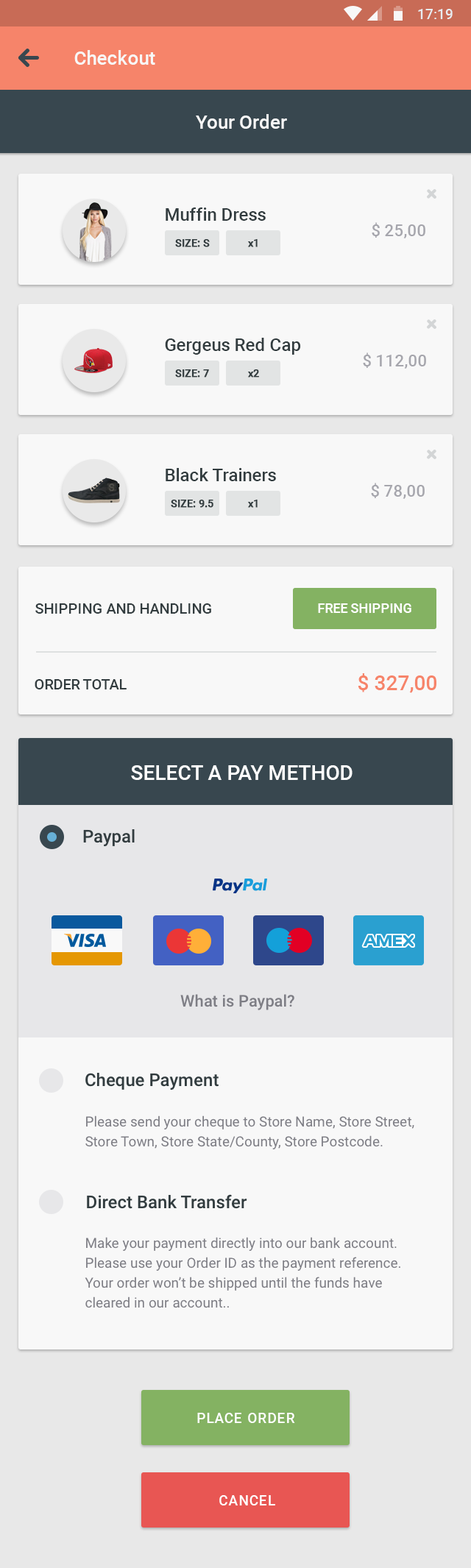
<style>
.page{position:relative;width:471px;height:1568px;background:#f8f8f8}
.page>*{position:absolute;margin:0}
.t1{font:14px "Roboto-Medium";color:#e8ecf0}
.t2{font:19.1px "Roboto-Medium";color:#f8f8f8}
.t3{font:17.7px "Roboto-Medium";color:#323c3f}
.t4{font:16.2px "Roboto-Medium";color:#a6a6ad}
.t5{font:10.3px "Roboto-Medium";color:#323c3f;font-weight:bold}
.t6{font:14.7px "Roboto-Medium";color:#323c3f}
.t7{font:13.2px "Roboto-Medium";color:#ffffff;text-transform:uppercase}
.t8{font:20.6px "Roboto-Medium";color:#f6846a;text-transform:uppercase}
.t9{font:14.7px "Roboto-Medium";color:#323c3f;text-transform:uppercase}
.t10{font:20.6px "Roboto-Medium";color:#ffffff;text-transform:uppercase}
.t11{font:16.2px "Roboto-Medium";color:#7e7e85}
.t12{font:14px/19.9px "Roboto-Regular";color:#7e7e85}
.t13{font:14px "Roboto-Medium";letter-spacing:0.06em;color:#ffffff;text-transform:uppercase}
</style>
<div class="page">
<p class="t1" style="left:418px;top:9px;width:35px;height:10px">17:19</p>
<p class="t2" style="left:74px;top:50px;width:81px;height:15px">Checkout</p>
<p class="t2" style="left:196px;top:114px;width:91px;height:15px">Your Order</p>
<p class="t3" style="left:166px;top:207px;width:100px;height:14px">Muffin Dress</p>
<p class="t4" style="left:372px;top:222px;width:53px;height:16px">$ 25,00</p>
<p class="t5" style="left:175px;top:239px;width:35px;height:8px">SIZE: S</p>
<p class="t5" style="left:248px;top:239px;width:10px;height:8px">x1</p>
<p class="t3" style="left:165px;top:338px;width:136px;height:17px">Gergeus Red Cap</p>
<p class="t4" style="left:363px;top:352px;width:63px;height:17px">$ 112,00</p>
<p class="t5" style="left:175px;top:369px;width:34px;height:8px">SIZE: 7</p>
<p class="t5" style="left:248px;top:369px;width:11px;height:8px">x2</p>
<p class="t3" style="left:166px;top:468px;width:110px;height:13px">Black Trainers</p>
<p class="t4" style="left:371px;top:483px;width:54px;height:16px">$ 78,00</p>
<p class="t5" style="left:171px;top:500px;width:42px;height:8px">SIZE: 9.5</p>
<p class="t5" style="left:248px;top:500px;width:10px;height:8px">x1</p>
<p class="t6" style="left:35px;top:603px;width:176px;height:11px">SHIPPING AND HANDLING</p>
<p class="t7" style="left:318px;top:603px;width:93px;height:10px">free shipping</p>
<p class="t8" style="left:358px;top:673px;width:78px;height:20px">$ 327,00</p>
<p class="t9" style="left:35px;top:679px;width:92px;height:10px">order total</p>
<p class="t10" style="left:131px;top:765px;width:221px;height:15px">select a pay method</p>
<p class="t3" style="left:83px;top:829px;width:52px;height:18px">Paypal</p>
<p class="t11" style="left:180px;top:994px;width:114px;height:16px">What is Paypal?</p>
<p class="t3" style="left:85px;top:1073px;width:134px;height:17px">Cheque Payment</p>
<p class="t12" style="left:85px;top:1115px;width:329px;height:34px">Please send your cheque to Store Name, Store Street, Store Town, Store State/County, Store Postcode.</p>
<p class="t3" style="left:87px;top:1194px;width:160px;height:15px">Direct Bank Transfer</p>
<p class="t12" style="left:85px;top:1237px;width:315px;height:71px">Make your payment directly into our bank account. Please use your Order ID as the payment reference. Your order won’t be shipped until the funds have cleared in our account..</p>
<p class="t13" style="left:197px;top:1413px;width:98px;height:10px">place order</p>
<p class="t13" style="left:219px;top:1495px;width:56px;height:10px">cancel</p>
</div>
